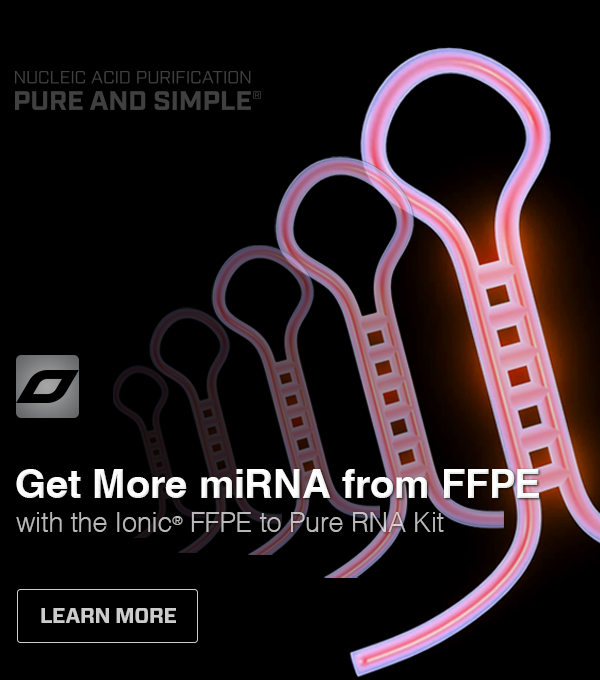
<style>
.page{position:relative;width:600px;height:680px;background:#000000}
.page>*{position:absolute;margin:0}
.t1{font:40px "Helvetica-Bold";color:#ffffff}
.t2{font:27.5px "Helvetica-Light";letter-spacing:-0.007em;color:#b8b8b8}
.t3{font:22.4px "Helvetica-Light";letter-spacing:-0.007em;color:#b8b8b8;text-transform:uppercase}
.t4{font:20.8px "Forza-Bold";letter-spacing:-0.01em;color:#cccccc;text-transform:uppercase}
</style>
<div class="page">
<p class="t1" style="left:16px;top:469px;width:523px;height:29px">Get More miRNA from FFPE</p>
<p class="t2" style="left:16px;top:512px;width:428px;height:20px">with the Ionic<span class="t3">®</span> FFPE to Pure RNA Kit</p>
<p class="t4" style="left:41px;top:608px;width:135px;height:15px">Learn More</p>
</div>
